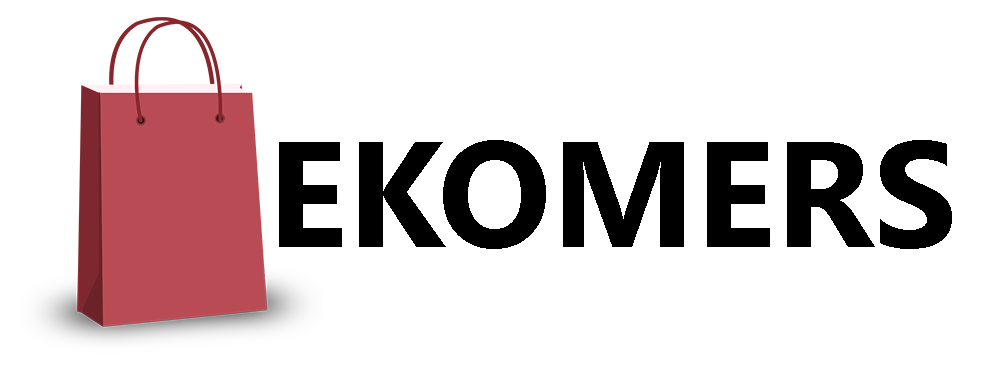
<style>
.page{position:relative;width:1000px;height:367px;background:#ffffff}
.page>*{position:absolute;margin:0}
.t1{font:150px "NirmalaUI-Bold";color:#000000}
</style>
<div class="page">
<p class="t1" style="left:279px;top:140px;width:673px;height:109px">EKOMERS</p>
</div>
